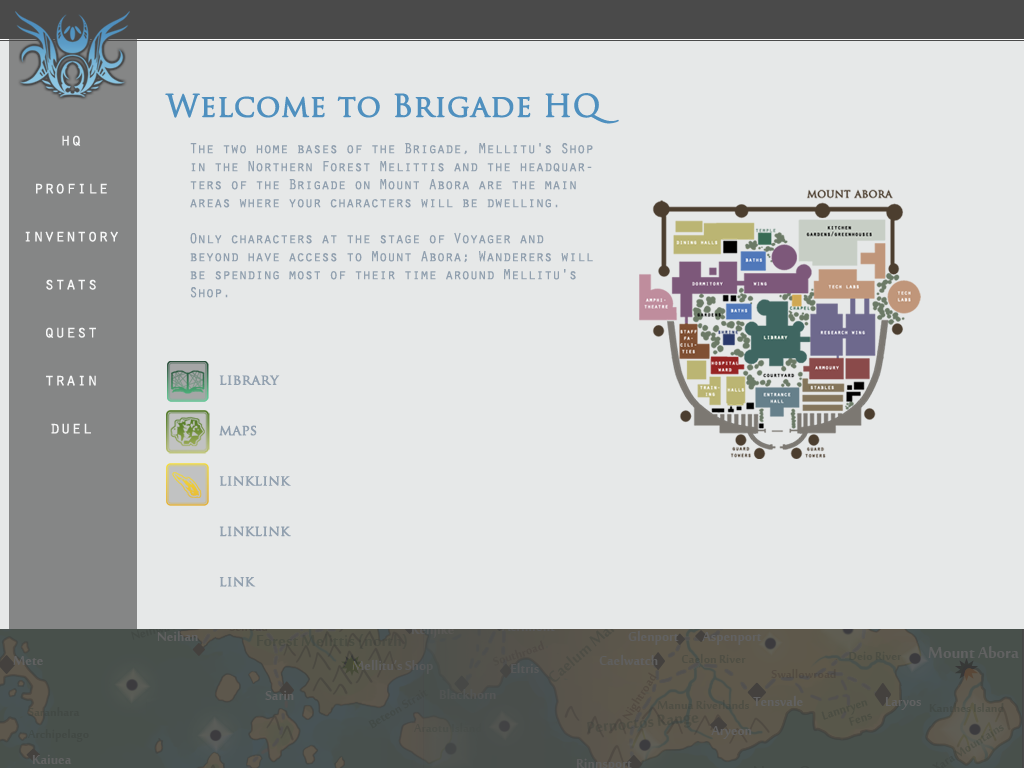
<style>
.page{position:relative;width:1024px;height:768px;background:#e6e8e8}
.page>*{position:absolute;margin:0}
.t1{font:30px "TrajanPro-Regular";color:#4f90bf;font-weight:bold}
.t2{font:18px/24px "OratorStd";color:#ffffff}
.t3{font:15px "OratorStd";letter-spacing:-0.05em;color:#91a0af}
.t4{font:14px "TrajanPro-Regular";color:#91a0af;font-weight:bold}
</style>
<div class="page">
<p class="t1" style="left:165px;top:93px;width:454px;height:31px">Welcome to Brigade HQ</p>
<p class="t2" style="left:25px;top:135px;width:93px;height:299px;text-align:center">hq<br><br>profile<br><br>inventory<br><br>stats<br><br>quest<br><br>train<br><br>duel</p>
<p class="t3" style="left:190px;top:143px;width:403px;height:155px">The two home bases of the Brigade, Mellitu's Shop in the Northern Forest Melittis and the headquarters of the Brigade on Mount Abora are the main areas where your characters will be dwelling. <br><br>Only characters at the stage of Voyager and beyond have access to Mount Abora; Wanderers will be spending most of their time around Mellitu's Shop.</p>
<p class="t4" style="left:219px;top:375px;width:72px;height:212px">library<br><br><br>maps<br><br><br>linklink<br><br><br>linklink<br><br><br>link</p>
</div>
